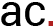
<style>
.page{position:relative;width:54px;height:27px;background:#ffffff}
.page>*{position:absolute;margin:0}
.t1{font:44px "Roboto-Regular";color:#000000}
.t2{font:46px "Roboto-Regular";color:#af2020}
</style>
<div class="page">
<p class="t1" style="left:1px;top:2px;width:44px;height:24px">ac</p>
<p class="t2" style="left:48px;top:21px;width:5px;height:5px">.</p>
</div>
